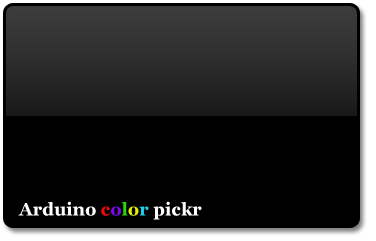
<style>
.page{position:relative;width:376px;height:241px;background:#000000}
.page>*{position:absolute;margin:0}
.t1{font:18px "Georgia-Bold";color:#ffffff}
.t2{font:18px "Georgia-Bold";color:#f40909}
.t3{font:18px "Georgia-Bold";color:#7a07f0}
.t4{font:18px "Georgia-Bold";color:#29d907}
.t5{font:18px "Georgia-Bold";color:#e2ef0d}
.t6{font:18px "Georgia-Bold";color:#1dcee8}
</style>
<div class="page">
<p class="t1" style="left:18px;top:201px;width:184px;height:19px">Arduino <span class="t2">c</span><span class="t3">o</span><span class="t4">l</span><span class="t5">o</span><span class="t6">r</span> pickr</p>
</div>
